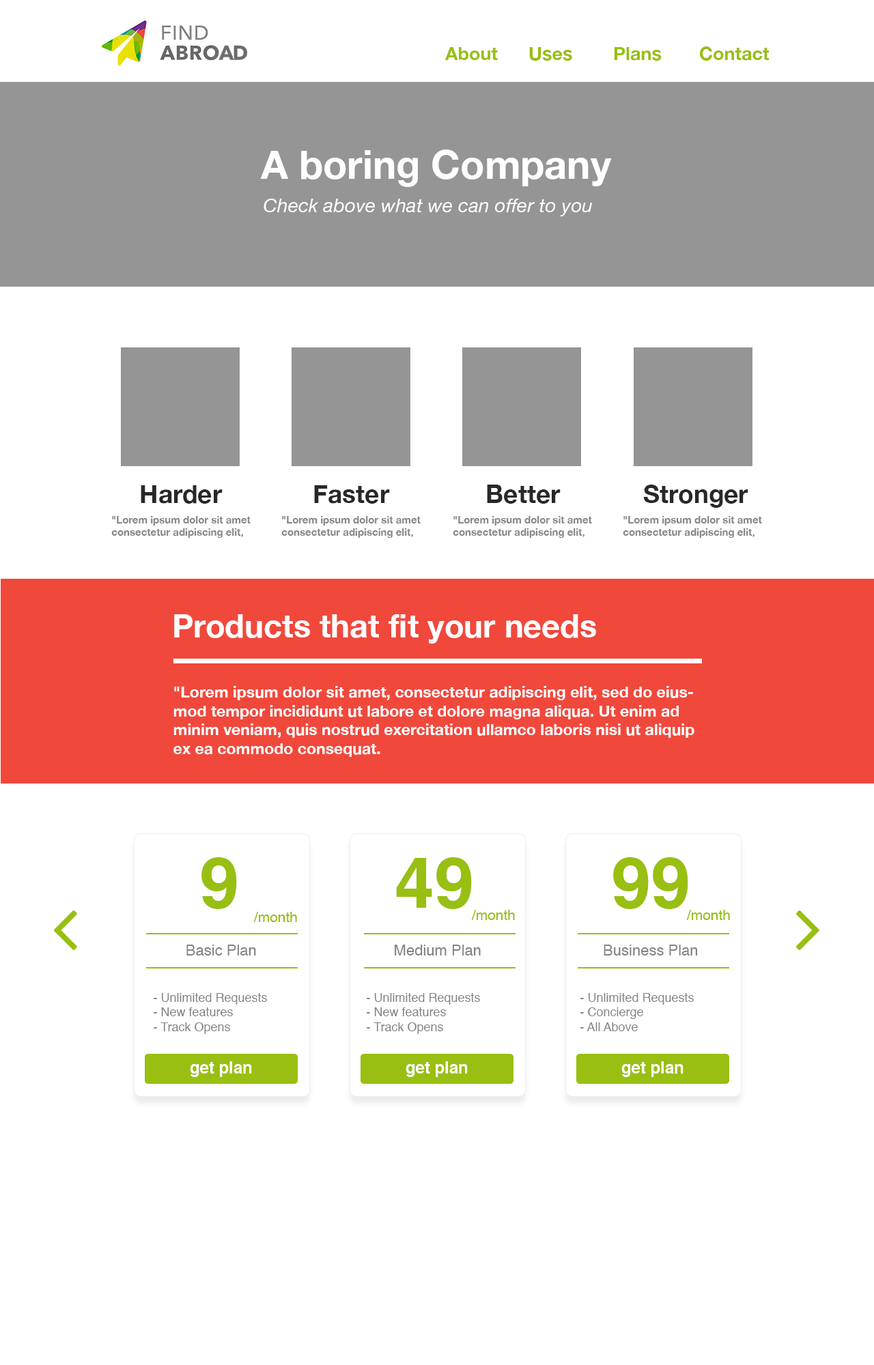
<style>
.page{position:relative;width:874px;height:1365px;background:#ffffff}
.page>*{position:absolute;margin:0}
.t1{font:18.4px "HelveticaNeue-Bold";color:#98bf11}
.t2{font:39.5px "HelveticaNeue-Bold";color:#ffffff}
.t3{font:19.3px "HelveticaNeue-Italic";color:#ffffff}
.t4{font:25.3px "HelveticaNeue-Bold";color:#282828}
.t5{font:10.2px "HelveticaNeue-Bold";color:#888888}
.t6{font:32.1px "HelveticaNeue-Bold";color:#ffffff}
.t7{font:15.7px "HelveticaNeue-Bold";color:#ffffff}
.t8{font:71px "Helvetica-Bold";color:#98bf11}
.t9{font:14.3px "Helvetica";color:#98bf11}
.t10{font:15px "Helvetica";color:#848484}
.t11{font:12.3px "Helvetica";color:#848484}
.t12{font:16.4px "Helvetica-Bold";color:#ffffff}
</style>
<div class="page">
<p class="t1" style="left:444px;top:47px;width:54px;height:13px">About</p>
<p class="t1" style="left:529px;top:47px;width:43px;height:14px">Uses</p>
<p class="t1" style="left:614px;top:47px;width:47px;height:14px">Plans</p>
<p class="t1" style="left:700px;top:46px;width:69px;height:15px">Contact</p>
<p class="t2" style="left:260px;top:149px;width:352px;height:38px">A boring Company</p>
<p class="t3" style="left:263px;top:199px;width:329px;height:17px">Check above what we can offer to you</p>
<p class="t4" style="left:141px;top:485px;width:81px;height:19px">Harder</p>
<p class="t4" style="left:314px;top:485px;width:76px;height:19px">Faster</p>
<p class="t4" style="left:487px;top:485px;width:73px;height:19px">Better</p>
<p class="t4" style="left:643px;top:485px;width:105px;height:23px">Stronger</p>
<p class="t5" style="left:111px;top:516px;width:139px;height:22px">"Lorem ipsum dolor sit amet<br>consectetur adipiscing elit,</p>
<p class="t5" style="left:281px;top:516px;width:139px;height:22px">"Lorem ipsum dolor sit amet<br>consectetur adipiscing elit,</p>
<p class="t5" style="left:452px;top:516px;width:140px;height:22px">"Lorem ipsum dolor sit amet<br>consectetur adipiscing elit,</p>
<p class="t5" style="left:622px;top:516px;width:140px;height:22px">"Lorem ipsum dolor sit amet<br>consectetur adipiscing elit,</p>
<p class="t6" style="left:174px;top:614px;width:422px;height:30px">Products that fit your needs</p>
<p class="t7" style="left:173px;top:686px;width:521px;height:71px">"Lorem ipsum dolor sit amet, consectetur adipiscing elit, sed do eiusmod tempor incididunt ut labore et dolore magna aliqua. Ut enim ad minim veniam, quis nostrud exercitation ullamco laboris nisi ut aliquip ex ea commodo consequat.</p>
<p class="t8" style="left:201px;top:857px;width:36px;height:52px">9</p>
<p class="t8" style="left:396px;top:857px;width:76px;height:52px">49</p>
<p class="t8" style="left:613px;top:857px;width:75px;height:52px">99</p>
<p class="t9" style="left:253px;top:912px;width:44px;height:10px">/month</p>
<p class="t9" style="left:471px;top:910px;width:44px;height:10px">/month</p>
<p class="t9" style="left:686px;top:910px;width:44px;height:10px">/month</p>
<p class="t10" style="left:186px;top:945px;width:70px;height:10px">Basic Plan</p>
<p class="t10" style="left:394px;top:945px;width:86px;height:10px">Medium Plan</p>
<p class="t10" style="left:603px;top:945px;width:95px;height:10px">Business Plan</p>
<p class="t11" style="left:154px;top:993px;width:113px;height:41px">- Unlimited Requests<br>- New features<br>- Track Opens</p>
<p class="t11" style="left:366px;top:993px;width:114px;height:41px">- Unlimited Requests<br>- New features<br>- Track Opens</p>
<p class="t11" style="left:580px;top:993px;width:113px;height:38px">- Unlimited Requests<br>- Concierge<br>- All Above</p>
<p class="t12" style="left:190px;top:1061px;width:62px;height:16px">get plan</p>
<p class="t12" style="left:405px;top:1061px;width:63px;height:16px">get plan</p>
<p class="t12" style="left:621px;top:1061px;width:62px;height:16px">get plan</p>
</div>
